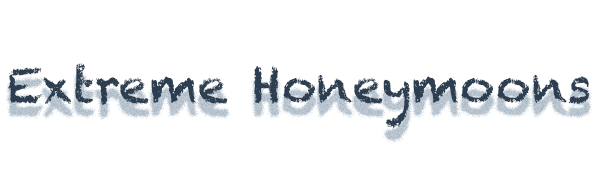
<style>
.page{position:relative;width:600px;height:170px;background:#ffffff}
.page>*{position:absolute;margin:0}
.t1{font:48px "Chalkduster";color:#2c3e50}
</style>
<div class="page">
<p class="t1" style="left:8px;top:63px;width:581px;height:66px">Extreme Honeymoons</p>
</div>
